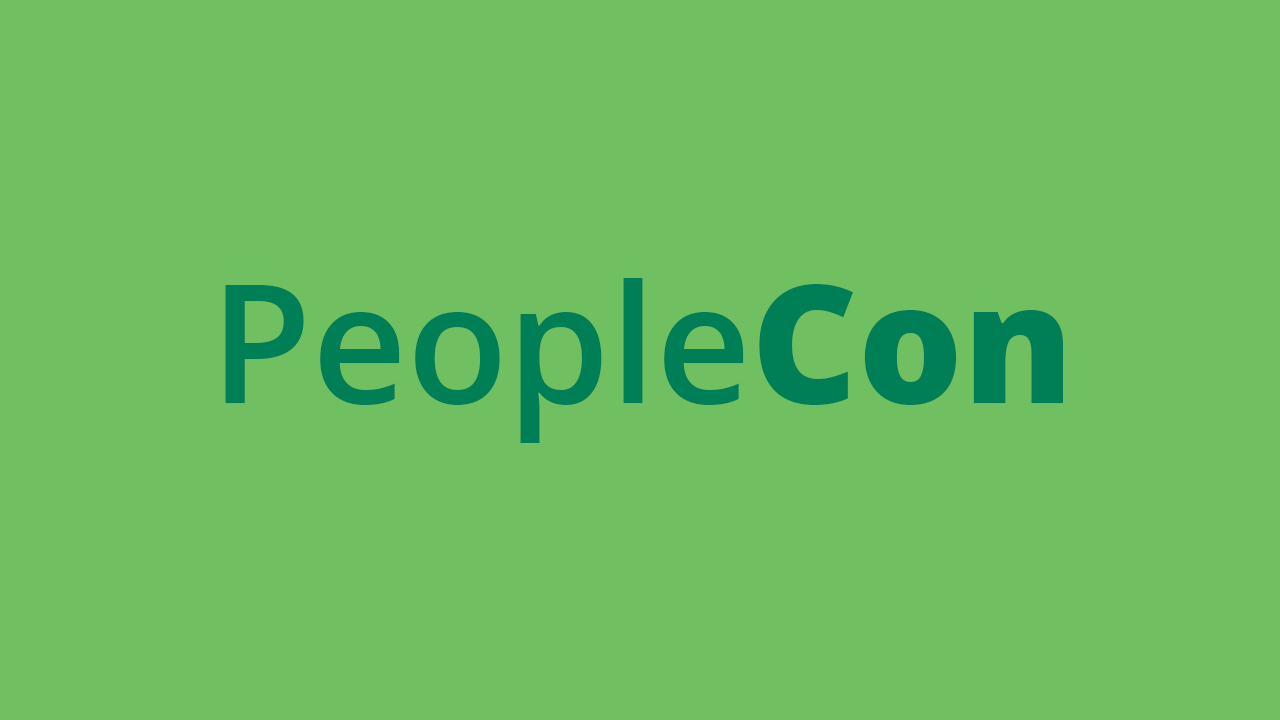
<style>
.page{position:relative;width:1280px;height:720px;background:#70c061}
.page>*{position:absolute;margin:0}
.t1{font:165px "OpenSans-Semibold";color:#007f57}
.t2{font:165px "OpenSans-Extrabold";color:#007f57}
</style>
<div class="page">
<p class="t1" style="left:225px;top:278px;width:838px;height:165px">People<span class="t2">Con</span></p>
</div>
